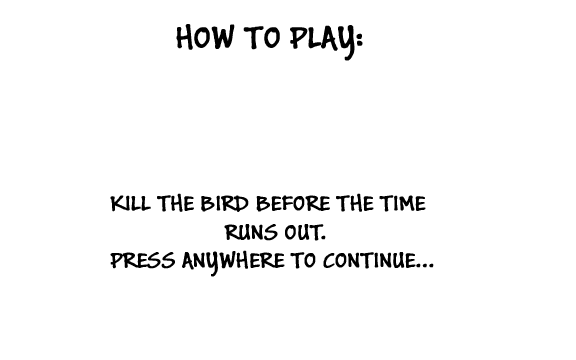
<style>
.page{position:relative;width:576px;height:360px;background:#ffffff}
.page>*{position:absolute;margin:0}
.t1{font:24px "BuxtonSketch";color:#000000;font-weight:bold}
.t2{font:34px "BuxtonSketch";color:#000000;font-weight:bold}
</style>
<div class="page">
<p class="t1" style="left:110px;top:24px;width:316px;height:217px"><span class="t2">HOW TO PLAY:<br><br></span><br><br><br><br>                               KILL THE BIRD BEFORE THE TIME <br>        RUNS OUT.</p>
<p class="t1" style="left:110px;top:250px;width:324px;height:27px">PRESS ANYWHERE TO CONTINUE...</p>
</div>
